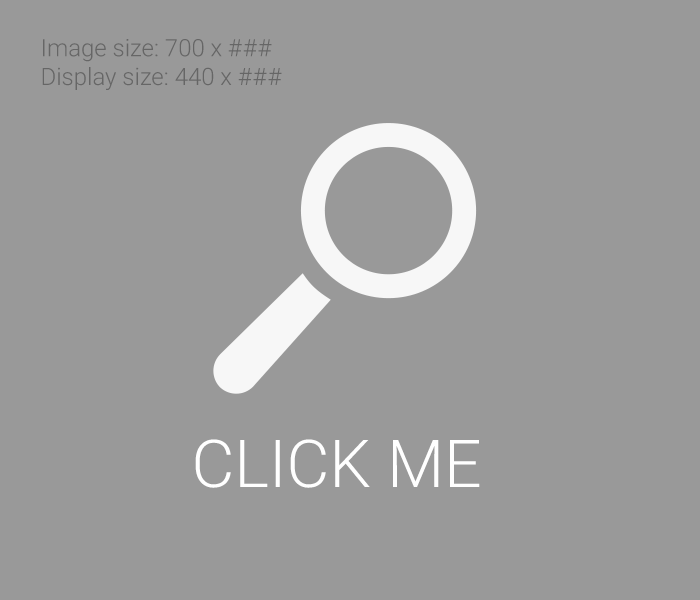
<style>
.page{position:relative;width:700px;height:600px;background:#999999}
.page>*{position:absolute;margin:0}
.t1{font:24px "Roboto-Light";color:#666666}
.t2{font:65.9px "Roboto-Light";color:#ffffff;text-transform:uppercase}
</style>
<div class="page">
<p class="t1" style="left:42px;top:39px;width:240px;height:51px">Image size: 700 x ###<br>Display size: 440 x ###</p>
<p class="t2" style="left:195px;top:439px;width:285px;height:49px">Click me</p>
</div>
